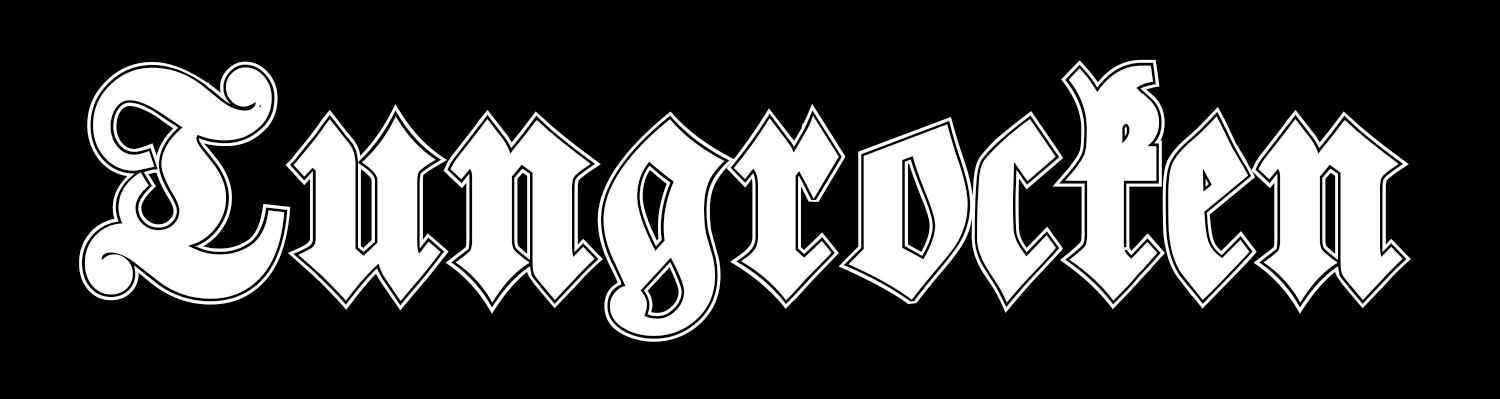
<style>
.page{position:relative;width:1500px;height:399px;background:#000000}
.page>*{position:absolute;margin:0}
.t1{font:303.7px "Walbaum-Fraktur-Inline-Bold";color:#ffffff}
</style>
<div class="page">
<p class="t1" style="left:79px;top:59px;width:1332px;height:283px">Tungrocken</p>
</div>
